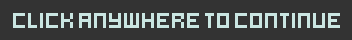
<style>
.page{position:relative;width:352px;height:40px;background:#333333}
.page>*{position:absolute;margin:0}
.t1{font:24px "hooge05_55Cyr2";color:#cae6e2}
</style>
<div class="page">
<p class="t1" style="left:13px;top:13px;width:327px;height:15px">Click anywhere to continue</p>
</div>
